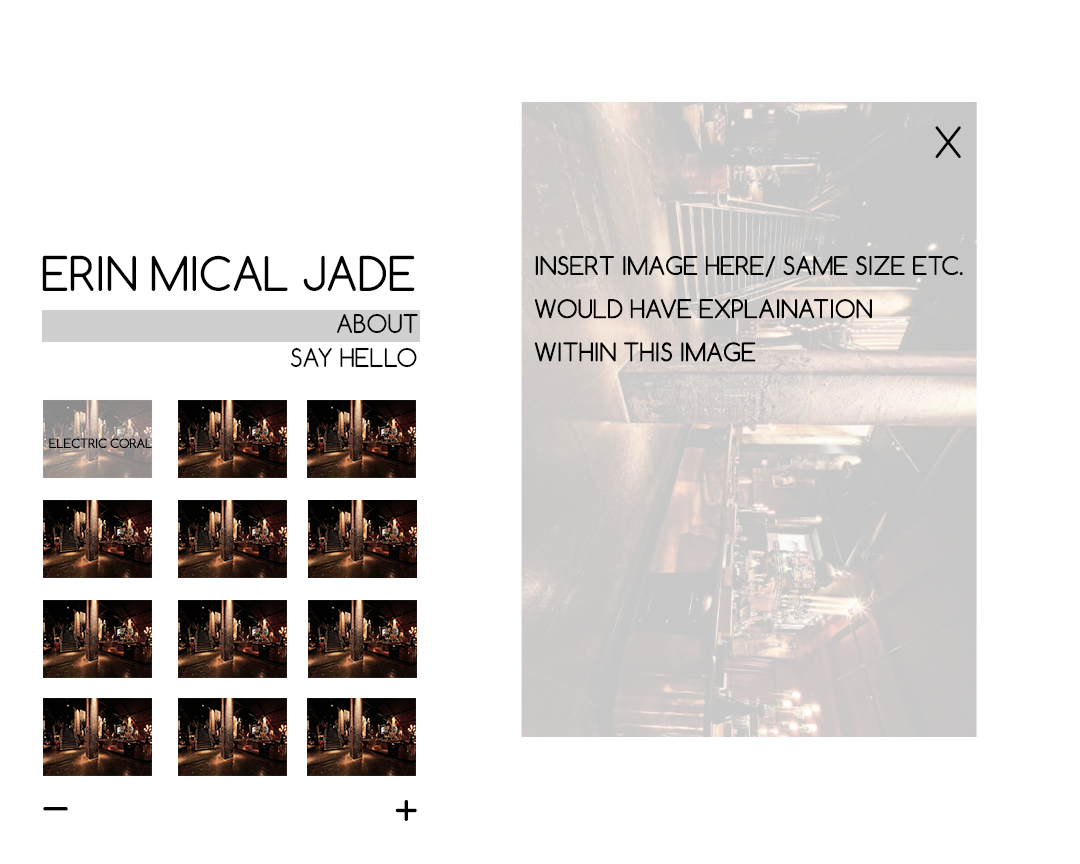
<style>
.page{position:relative;width:1080px;height:864px;background:#ffffff}
.page>*{position:absolute;margin:0}
.t1{font:40.5px "Comfortaa-Light";color:#000000}
.t2{font:45px "Comfortaa-Regular";color:#000000}
.t3{font:24.3px "Comfortaa-Regular";color:#000000}
.t4{font:12.2px "Comfortaa-Regular";color:#000000}
</style>
<div class="page">
<p class="t1" style="left:935px;top:126px;width:26px;height:32px">X</p>
<p class="t2" style="left:42px;top:255px;width:373px;height:36px">ERIN MICAL JADE</p>
<p class="t3" style="left:534px;top:256px;width:429px;height:106px">INSERT IMAGE HERE/ SAME SIZE ETC. <br><br>WOULD HAVE EXPLAINATION<br><br>WITHIN THIS IMAGE</p>
<p class="t3" style="left:337px;top:313px;width:81px;height:21px">ABOUT</p>
<p class="t3" style="left:291px;top:347px;width:126px;height:21px">SAY HELLO</p>
<p class="t4" style="left:49px;top:438px;width:103px;height:10px">ELECTRIC CORAL</p>
<p class="t2" style="left:43px;top:807px;width:25px;height:4px">_</p>
<p class="t2" style="left:395px;top:800px;width:22px;height:21px">+</p>
</div>
